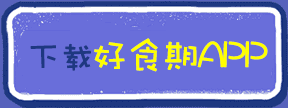
<style>
.page{position:relative;width:288px;height:108px;background:#696eda}
.page>*{position:absolute;margin:0}
.t1{font:38px "DFWaWaSC-W5";letter-spacing:-0.1em;color:#ffff00;font-weight:bold}
.t2{font:35px "DFWaWaSC-W5";letter-spacing:-0.1em;color:#1e3881;font-weight:bold}
</style>
<div class="page">
<p class="t1" style="left:30px;top:38px;width:238px;height:34px"><span class="t2">下载</span>好食期APP</p>
</div>
